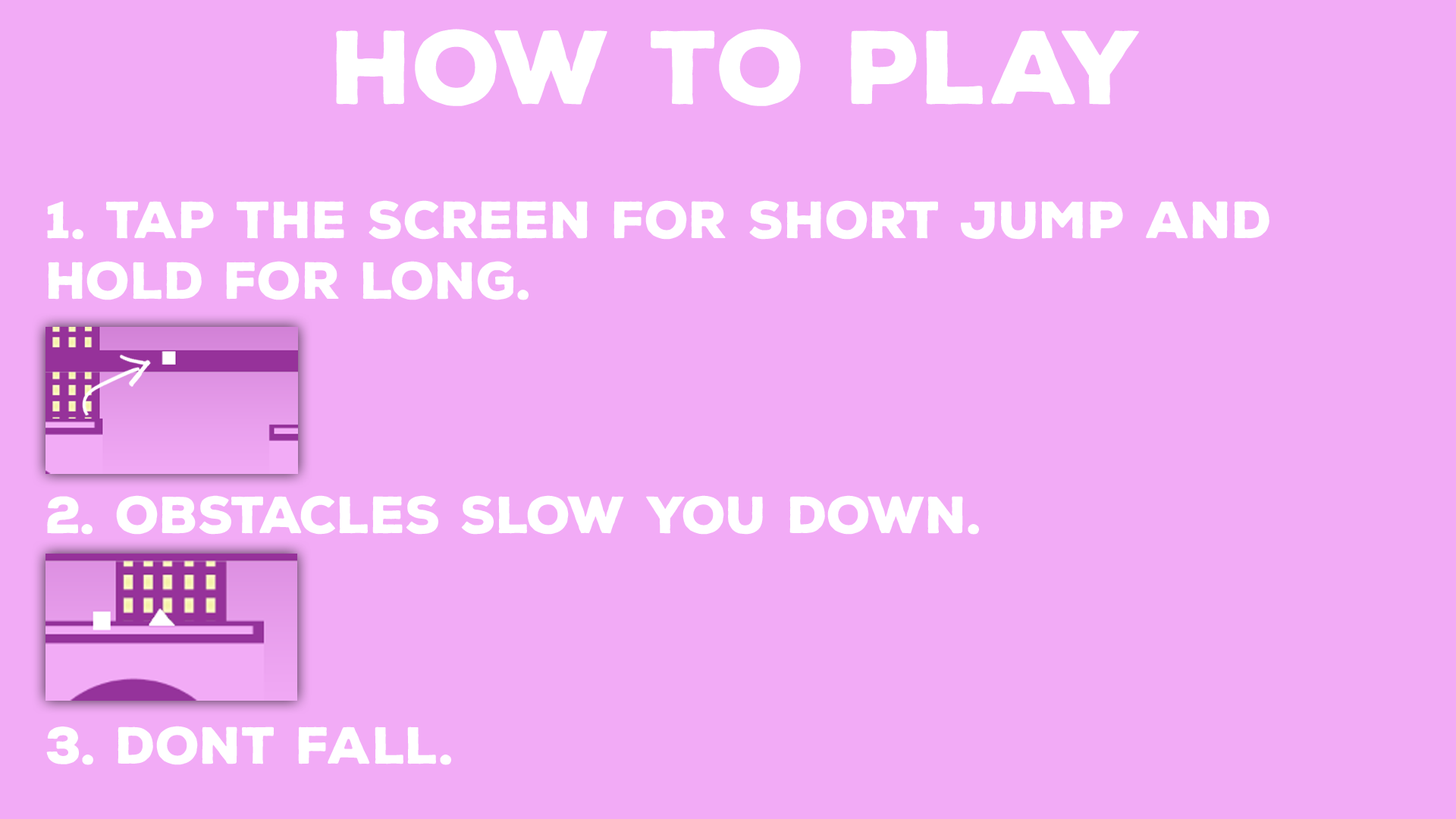
<style>
.page{position:relative;width:1456px;height:819px;background:#f2abf6}
.page>*{position:absolute;margin:0}
.t1{font:101.1px "NexaRustSans-Black";color:#ffffff}
.t2{font:50.5px "NexaRustSans-Black";color:#ffffff}
</style>
<div class="page">
<p class="t1" style="left:336px;top:29px;width:803px;height:77px">How To Play</p>
<p class="t2" style="left:47px;top:200px;width:1222px;height:100px">1. Tap The Screen For Short Jump and Hold for long.</p>
<p class="t2" style="left:47px;top:495px;width:932px;height:40px">2. Obstacles slow You down.</p>
<p class="t2" style="left:46px;top:726px;width:405px;height:39px">3. Dont Fall.</p>
</div>
